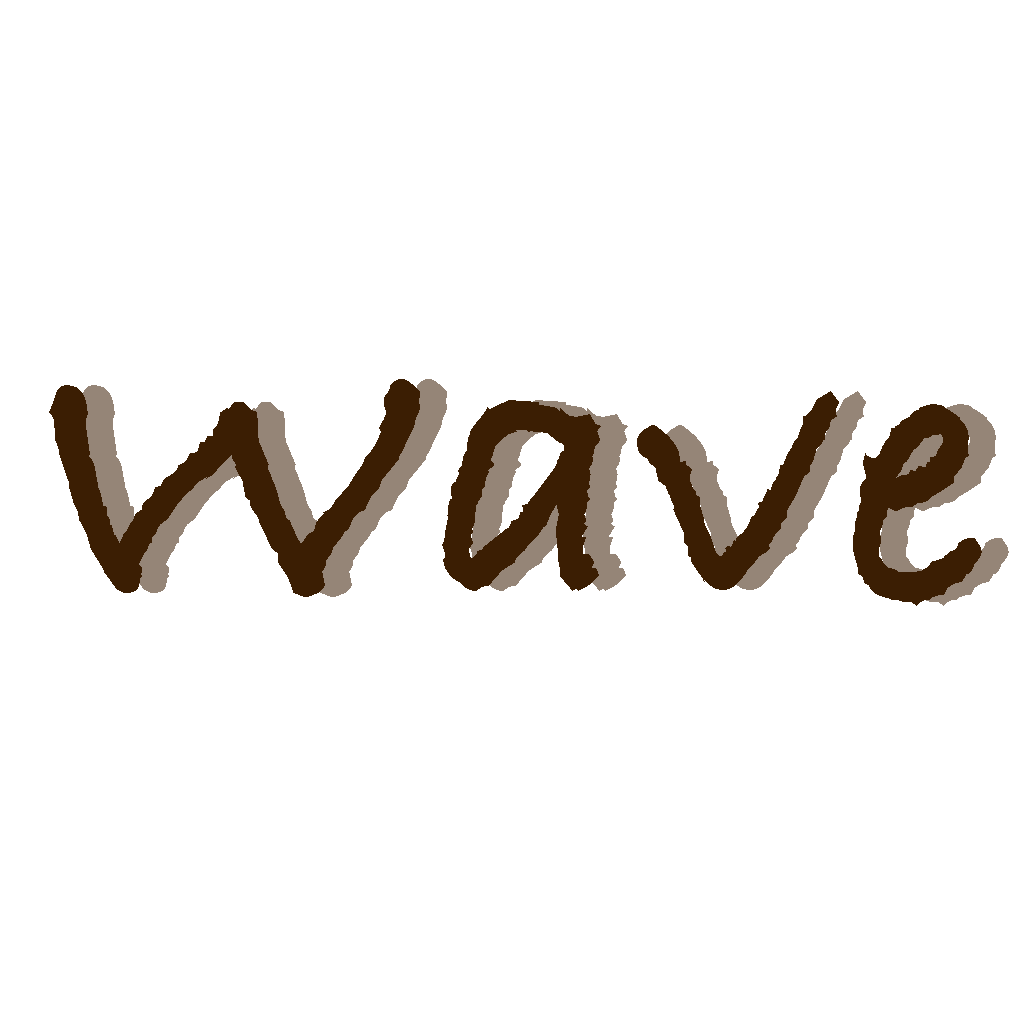
<style>
.page{position:relative;width:1024px;height:1024px;background:#ffffff}
.page>*{position:absolute;margin:0}
.t1{font:390.8px "BradleyHandITCTT-Bold";letter-spacing:0.025em;color:#3b1e03}
.t2{font:390.8px "BradleyHandITCTT-Bold";letter-spacing:0.025em}
</style>
<div class="page">
<p class="t1" style="left:49px;top:379px;width:933px;height:227px">Wave</p>
<p class="t2" style="left:76px;top:379px;width:933px;height:227px">Wave</p>
</div>
